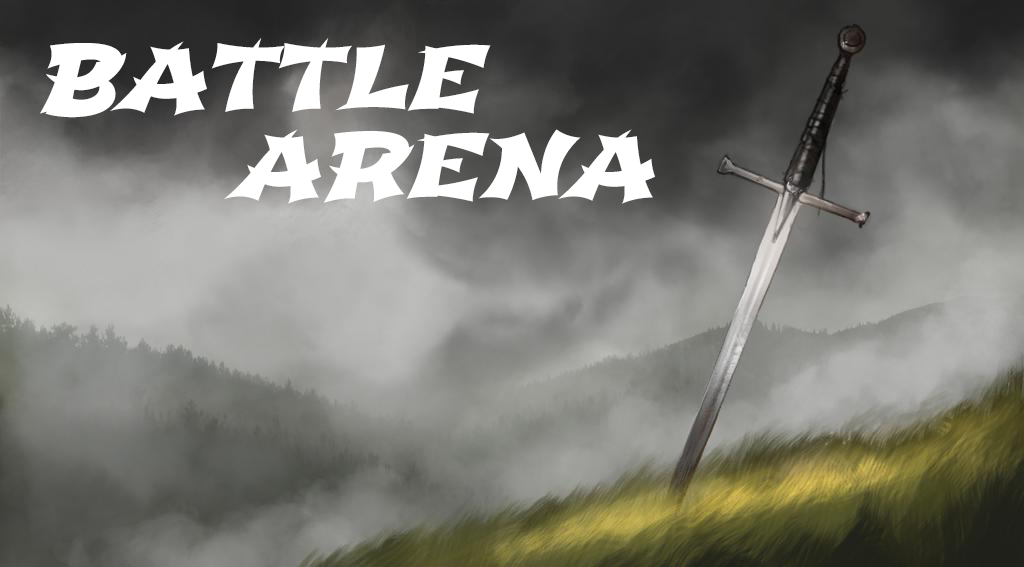
<style>
.page{position:relative;width:1024px;height:567px}
.page>*{position:absolute;margin:0}
.t1{font:88.2px/88.2px "Shojumaru-Regular";color:#ffffff;font-style:italic;scale:1.11 1}
</style>
<div class="page">
<p class="t1" style="left:40px;top:38px;width:615px;height:166px">BATTLE<br>     ARENA</p>
</div>
